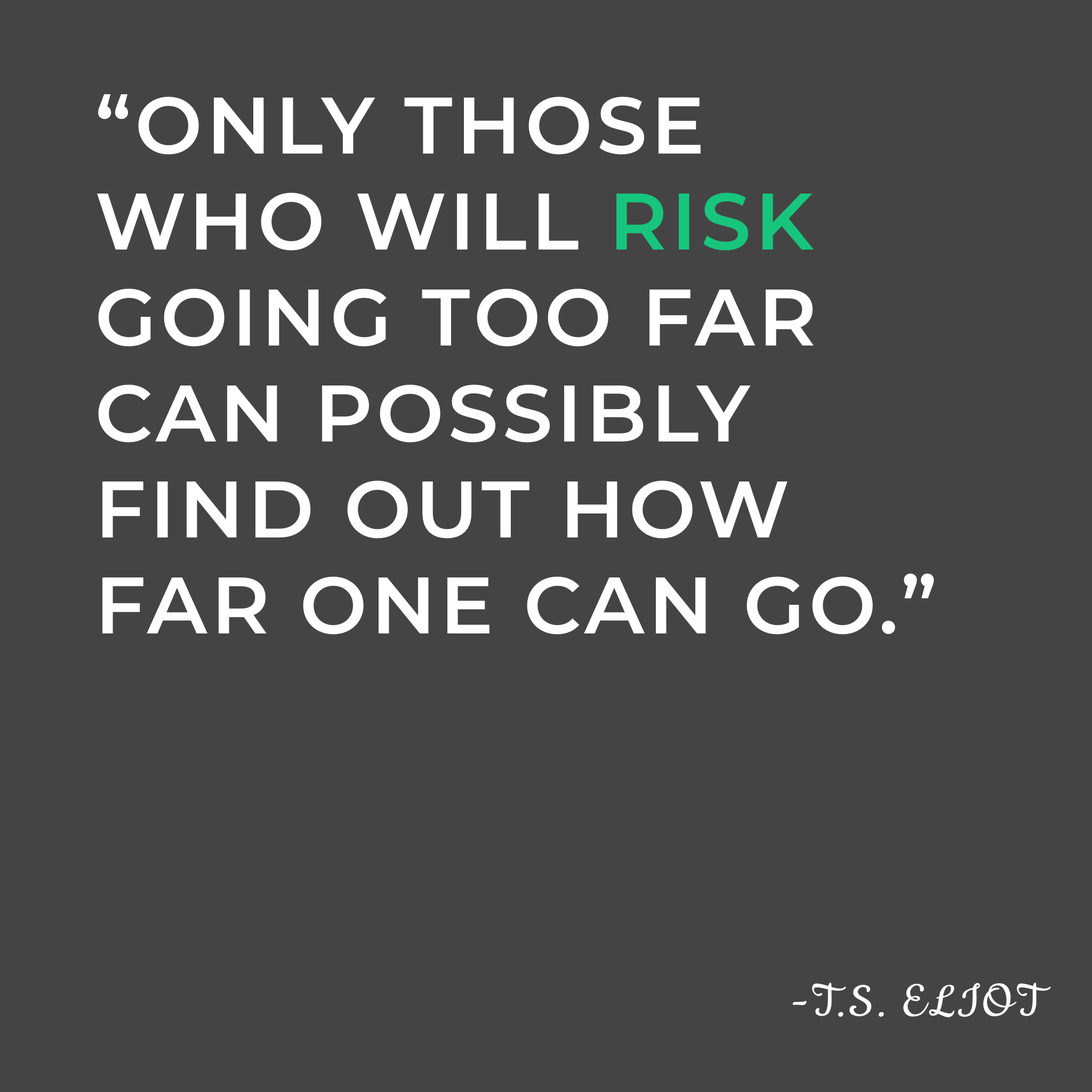
<style>
.page{position:relative;width:1092px;height:1092px;background:#444444}
.page>*{position:absolute;margin:0}
.t1{font:80px "Montserrat-SemiBold";letter-spacing:0.05em;color:#ffffff;text-transform:uppercase}
.t2{font:80px "Montserrat-SemiBold";letter-spacing:0.05em;color:#17c57d;text-transform:uppercase}
.t3{font:53.3px "Cookie-Regular";letter-spacing:0.05em;color:#ffffff;text-transform:uppercase}
</style>
<div class="page">
<p class="t1" style="left:97px;top:94px;width:837px;height:541px">“Only those <br>who will <span class="t2">risk</span> <br>going too far <br>can possibly <br>find out how <br>far one can go.”</p>
<p class="t3" style="left:792px;top:983px;width:259px;height:34px">-T.S. Eliot</p>
</div>
